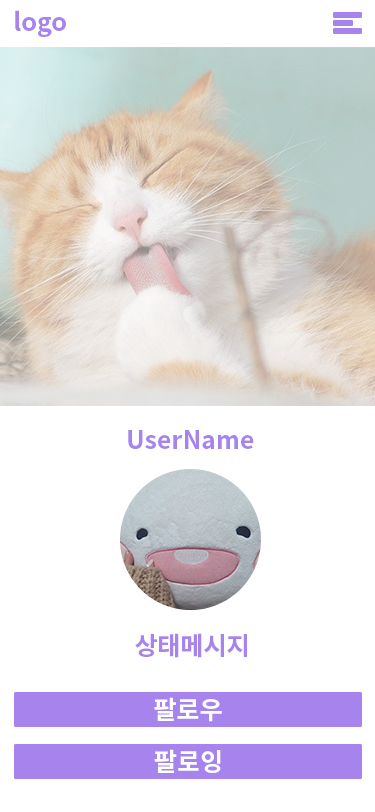
<style>
.page{position:relative;width:375px;height:812px;background:#ffffff}
.page>*{position:absolute;margin:0}
.t1{font:25px "NotoSansKR-Bold";color:#a683ed}
.t2{font:25px "NotoSansKR-Bold";color:#ffffff}
</style>
<div class="page">
<p class="t1" style="left:15px;top:10px;width:51px;height:27px">logo</p>
<p class="t1" style="left:128px;top:430px;width:126px;height:19px">UserName</p>
<p class="t1" style="left:135px;top:633px;width:112px;height:25px">상태메시지</p>
<p class="t2" style="left:154px;top:697px;width:68px;height:25px">팔로우</p>
<p class="t2" style="left:154px;top:749px;width:67px;height:24px">팔로잉</p>
</div>
